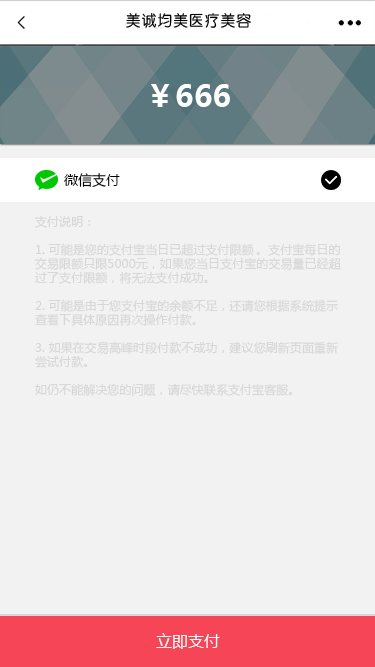
<style>
.page{position:relative;width:375px;height:667px;background:#f2f2f2}
.page>*{position:absolute;margin:0}
.t1{font:30px "MicrosoftYaHei-Bold";letter-spacing:0.005em;color:#ffffff}
.t2{font:14px "MicrosoftYaHei";letter-spacing:0.005em;color:#000000}
.t3{font:12px/14px "MicrosoftYaHei";letter-spacing:0.005em;color:#d7d7d7}
.t4{font:16px "MicrosoftYaHei";letter-spacing:0.005em;color:#ffffff}
</style>
<div class="page">
<p class="t1" style="left:151px;top:84px;width:79px;height:23px">￥666</p>
<p class="t2" style="left:64px;top:173px;width:56px;height:14px">微信支付</p>
<p class="t3" style="left:34px;top:215px;width:307px;height:181px">支付说明：<br> <br>1. 可能是您的支付宝当日已超过支付限额。支付宝每日的<br>交易限额只限5000元，如果您当日支付宝的交易量已经超<br>过了支付限额，将无法支付成功。<br> <br>2. 可能是由于您支付宝的余额不足，还请您根据系统提示<br>查看下具体原因再次操作付款。<br> <br>3. 如果在交易高峰时段付款不成功，建议您刷新页面重新<br>尝试付款。<br> <br>如仍不能解决您的问题，请尽快联系支付宝客服。</p>
<p class="t4" style="left:156px;top:633px;width:64px;height:16px">立即支付</p>
</div>
